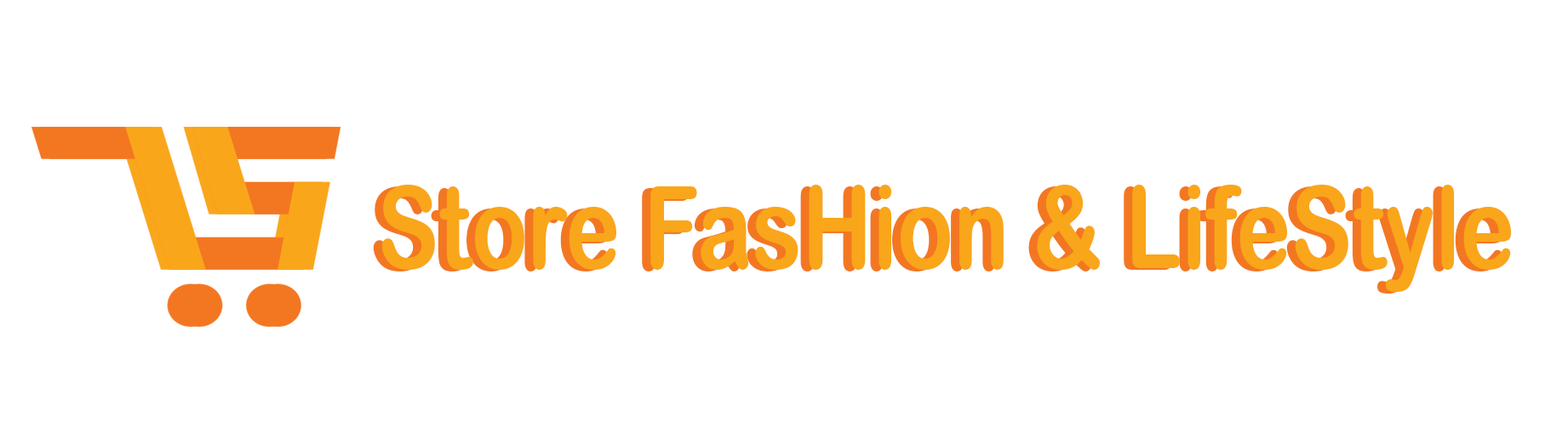
<style>
.page{position:relative;width:1568px;height:434px;background:#ffffff}
.page>*{position:absolute;margin:0}
.t1{font:114.8px "ArialRoundedMTBold";color:#f9a61a;scale:0.8 1}
.t2{font:114.8px "ArialRoundedMTBold";scale:0.8 1}
</style>
<div class="page">
<p class="t1" style="left:381px;top:185px;width:1131px;height:107px">Store FasHion &amp; LifeStyle</p>
<p class="t2" style="left:373px;top:186px;width:1130px;height:108px">Store FasHion &amp; LifeStyle</p>
</div>
